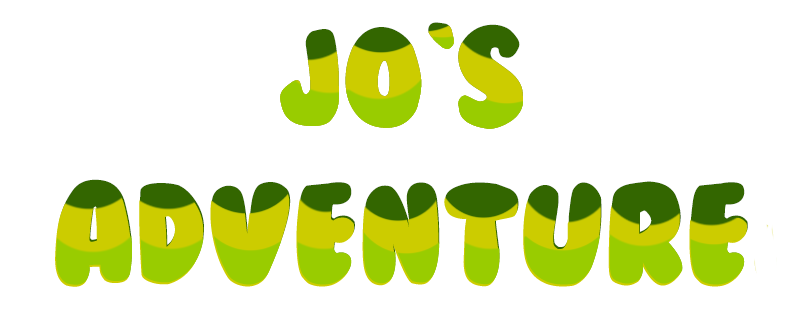
<style>
.page{position:relative;width:804px;height:324px;background:#ffffff}
.page>*{position:absolute;margin:0}
.t1{font:130px "BubbleGum"}
</style>
<div class="page">
<p class="t1" style="left:56px;top:22px;width:692px;height:263px;text-align:center">Jo`s <br>Adventure</p>
</div>
